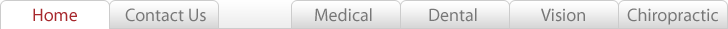
<style>
.page{position:relative;width:728px;height:29px}
.page>*{position:absolute;margin:0}
.t1{font:18px "MyriadPro-Regular";color:#a7282d}
.t2{font:18px "MyriadPro-Regular";color:#777777}
</style>
<div class="page">
<p class="t1" style="left:33px;top:8px;width:44px;height:14px">Home</p>
<p class="t2" style="left:125px;top:8px;width:81px;height:14px">Contact Us</p>
<p class="t2" style="left:315px;top:8px;width:57px;height:14px">Medical</p>
<p class="t2" style="left:429px;top:8px;width:48px;height:14px">Dental</p>
<p class="t2" style="left:541px;top:8px;width:44px;height:14px">Vision</p>
<p class="t2" style="left:627px;top:8px;width:91px;height:17px">Chiropractic</p>
</div>
